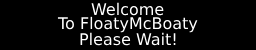
<style>
.page{position:relative;width:256px;height:50px;background:#000000}
.page>*{position:absolute;margin:0}
.t1{font:16px "DejaVuSans";color:#ffffff}
</style>
<div class="page">
<p class="t1" style="left:91px;top:2px;width:73px;height:14px">Welcome</p>
<p class="t1" style="left:57px;top:16px;width:141px;height:17px">To FloatyMcBoaty</p>
<p class="t1" style="left:80px;top:32px;width:96px;height:14px">Please Wait!</p>
</div>
